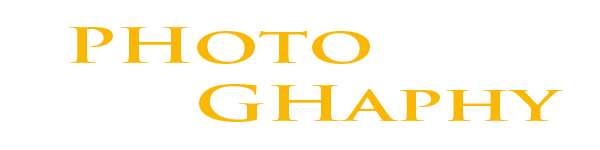
<style>
.page{position:relative;width:600px;height:150px;background:#ffffff}
.page>*{position:absolute;margin:0}
.t1{font:48px "TrajanPro-Bold";color:#fab805;scale:1.67 1}
.t2{font:48px "SymbolMT";color:#fab805;scale:1.67 1}
</style>
<div class="page">
<p class="t1" style="left:69px;top:27px;width:494px;height:95px"><span class="t2"><br> </span>PHoto<br>      GHaphy</p>
</div>
